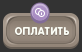
<style>
.page{position:relative;width:82px;height:52px;background:#333333}
.page>*{position:absolute;margin:0}
.t1{font:10px "RotondaC-Bold";letter-spacing:0.06em;color:#fbfdf5;text-transform:uppercase}
</style>
<div class="page">
<p class="t1" style="left:15px;top:27px;width:54px;height:8px">Оплатить</p>
</div>
